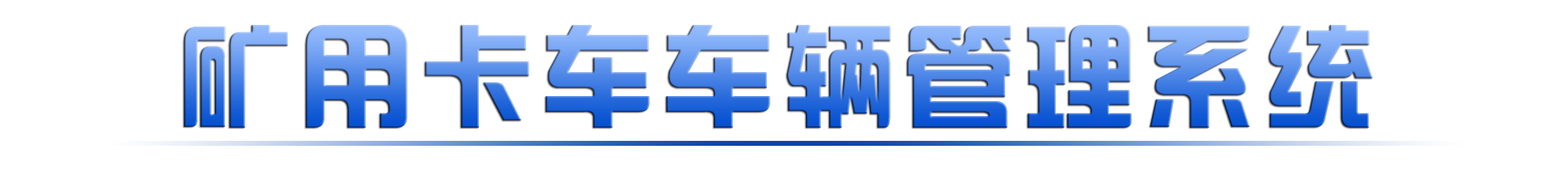
<style>
.page{position:relative;width:1568px;height:169px;background:#ffffff}
.page>*{position:absolute;margin:0}
.t1{font:109.6px "FZHZGBJW--GB1-0";letter-spacing:0.1em}
</style>
<div class="page">
<p class="t1" style="left:183px;top:25px;width:1190px;height:103px">矿用卡车车辆管理系统</p>
</div>
